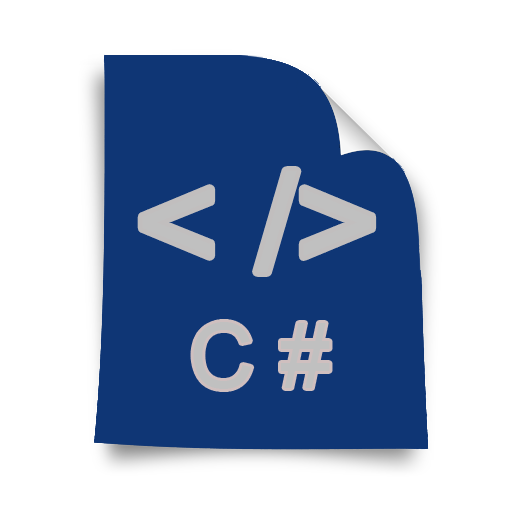
<style>
.page{position:relative;width:512px;height:512px;background:#ffffff}
.page>*{position:absolute;margin:0}
.t1{font:141.2px "ArialMT";color:#c0c0c0}
.t2{font:91.3px "ArialMT";color:#c0c0c0}
</style>
<div class="page">
<p class="t1" style="left:142px;top:171px;width:230px;height:101px">&lt; /&gt;</p>
<p class="t2" style="left:193px;top:322px;width:137px;height:67px">C #</p>
</div>
